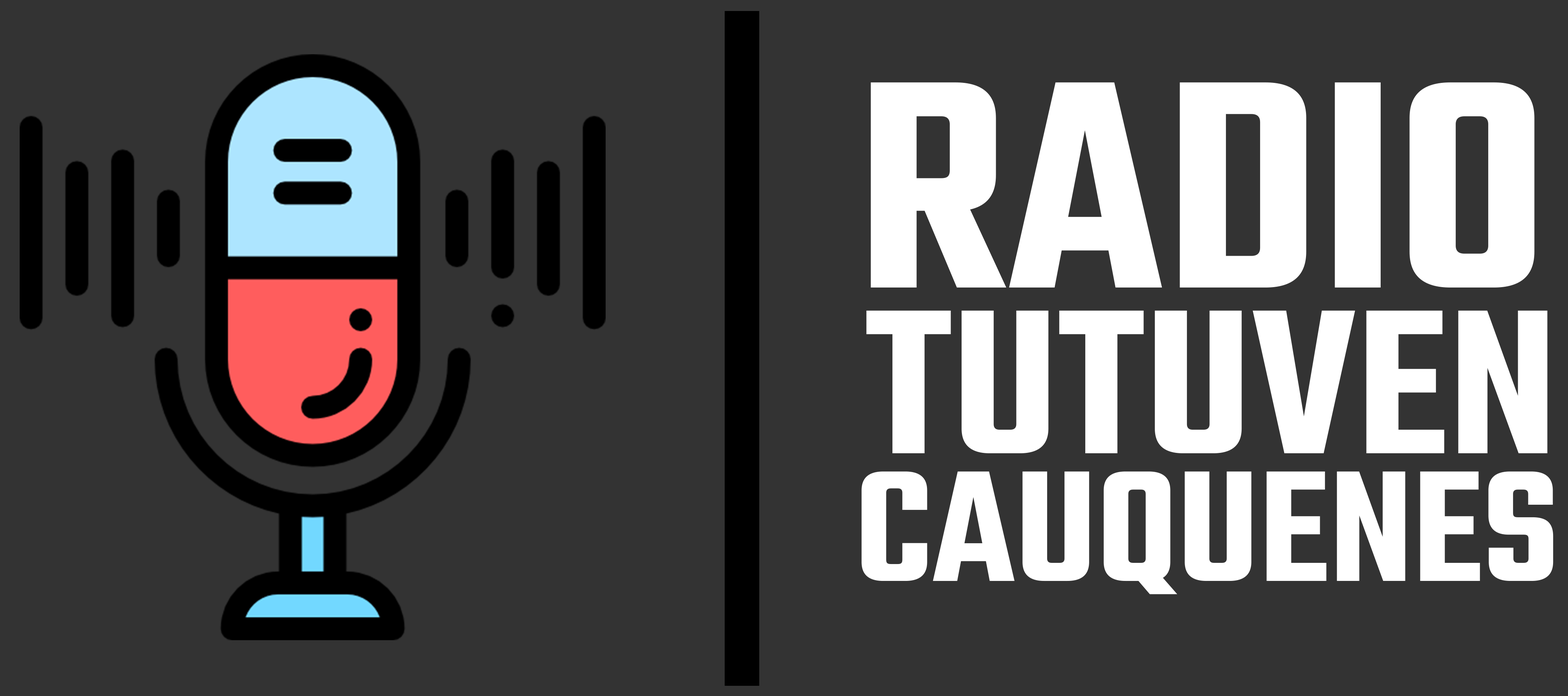
<style>
.page{position:relative;width:1568px;height:696px;background:#333333}
.page>*{position:absolute;margin:0}
.t1{font:322.4px "Teko-SemiBold";color:#ffffff}
.t2{font:224.2px "Teko-SemiBold";color:#ffffff}
.t3{font:171.8px "Teko-SemiBold";color:#ffffff}
</style>
<div class="page">
<p class="t1" style="left:870px;top:82px;width:665px;height:206px">RADIO</p>
<p class="t2" style="left:866px;top:310px;width:682px;height:143px">TUTUVEN</p>
<p class="t3" style="left:861px;top:471px;width:692px;height:123px">CAUQUENES</p>
</div>
